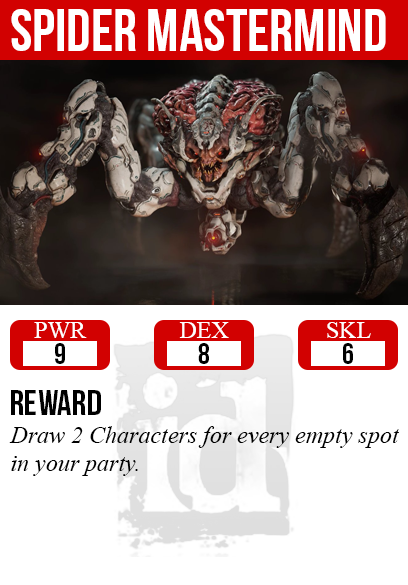
<style>
.page{position:relative;width:408px;height:585px;background:#ffffff}
.page>*{position:absolute;margin:0}
.t1{font:60px "BebasNeue";color:#ffffff}
.t2{font:24px "TimesNewRomanPSMT";color:#ffffff}
.t3{font:30px "BebasNeue";color:#000000}
.t4{font:36px "BebasNeue";color:#000000}
.t5{font:24px "TimesNewRomanPS-ItalicMT";color:#000000}
</style>
<div class="page">
<p class="t1" style="left:11px;top:9px;width:375px;height:42px">spider mastermind</p>
<p class="t2" style="left:34px;top:322px;width:53px;height:16px">PWR</p>
<p class="t2" style="left:179px;top:322px;width:50px;height:16px">DEX</p>
<p class="t2" style="left:327px;top:322px;width:44px;height:16px">SKL</p>
<p class="t3" style="left:55px;top:343px;width:10px;height:21px">9</p>
<p class="t3" style="left:198px;top:343px;width:11px;height:21px">8</p>
<p class="t3" style="left:343px;top:343px;width:10px;height:21px">6</p>
<p class="t4" style="left:11px;top:390px;width:90px;height:25px">reward</p>
<p class="t5" style="left:9px;top:426px;width:390px;height:50px">Draw 2 Characters for every empty spot<br>in your party.</p>
</div>
